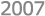
<style>
.page{position:relative;width:45px;height:16px;background:#ffffff}
.page>*{position:absolute;margin:0}
.t1{font:19px "Verdana";letter-spacing:-0.05em;color:#858585}
</style>
<div class="page">
<p class="t1" style="left:1px;top:1px;width:44px;height:15px">2007</p>
</div>
